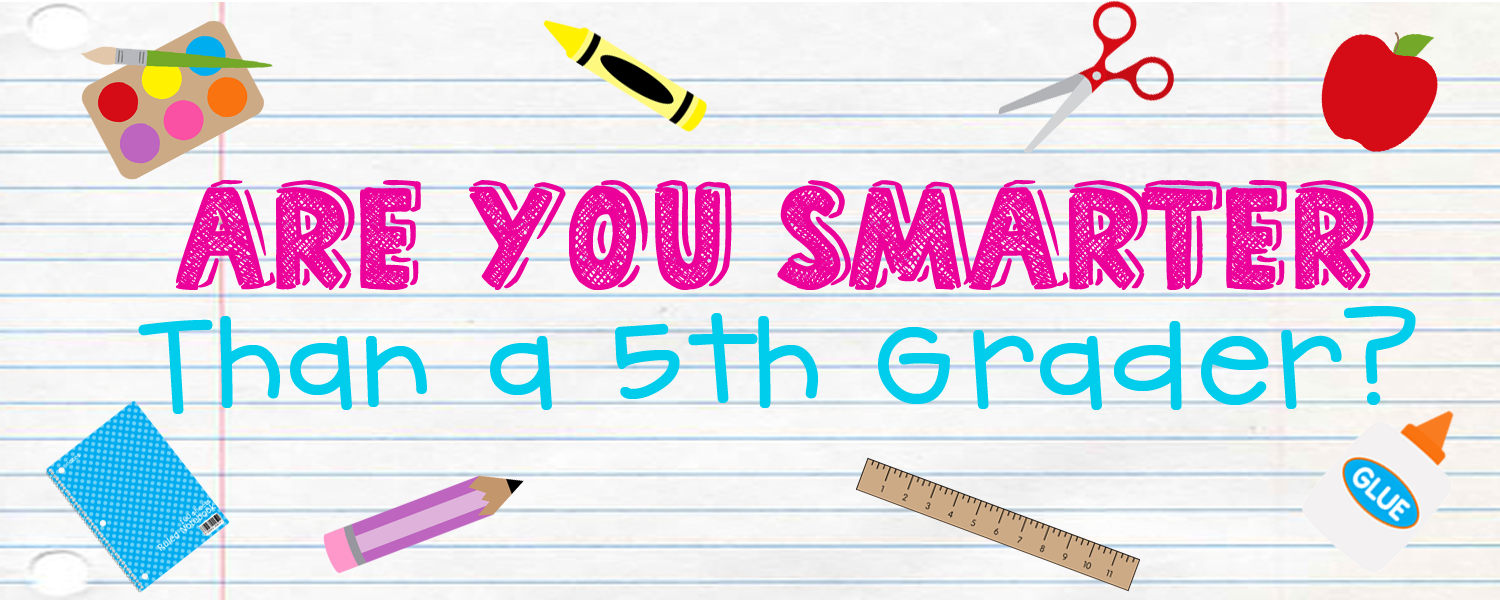
<style>
.page{position:relative;width:1500px;height:600px}
.page>*{position:absolute;margin:0}
.t1{font:156.8px "HomeSchool";color:#eb009a}
.t2{font:143.7px "CKHandprint";color:#00cceb}
</style>
<div class="page">
<p class="t1" style="left:176px;top:180px;width:1198px;height:110px">Are you Smarter</p>
<p class="t2" style="left:138px;top:306px;width:1278px;height:108px">Than a 5th Grader?</p>
</div>
